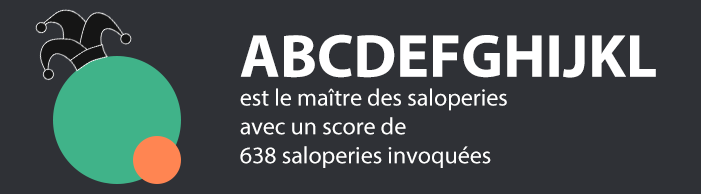
<style>
.page{position:relative;width:701px;height:194px;background:#2f3136}
.page>*{position:absolute;margin:0}
.t1{font:24px "MyriadPro-Regular";color:#ffffff}
.t2{font:61.4px "MyriadPro-Bold";color:#ffffff}
</style>
<div class="page">
<p class="t1" style="left:240px;top:34px;width:416px;height:134px"><span class="t2">ABCDEFGHIJKL<br></span>est le maître des saloperies <br>avec un score de <br>638 saloperies invoquées</p>
</div>
